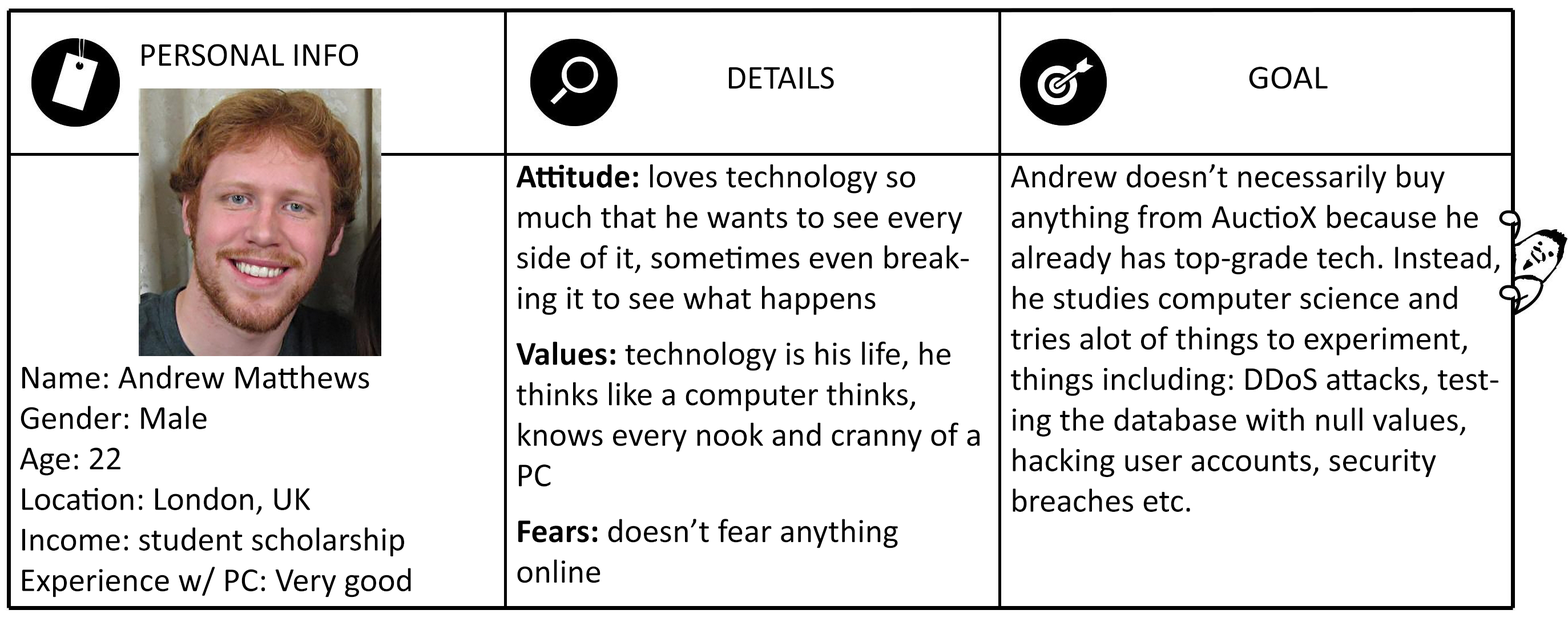
<style>
.page{position:relative;width:1568px;height:622px;background:#ffffff}
.page>*{position:absolute;margin:0}
.t1{font:33.8px "Calibri";color:#000000}
.t2{font:33.8px "Calibri";color:#000000;scale:1.04 1}
.t3{font:33.8px "Calibri-Bold";color:#000000}
</style>
<div class="page">
<p class="t1" style="left:142px;top:44px;width:216px;height:22px">PERSONAL INFO</p>
<p class="t1" style="left:729px;top:67px;width:105px;height:22px">DETAILS</p>
<p class="t2" style="left:1249px;top:67px;width:79px;height:22px">GOAL</p>
<p class="t1" style="left:516px;top:164px;width:464px;height:419px"><span class="t3">Attitude: </span>loves technology so much that he wants to see every side of it, sometimes even breaking it to see what happens<br><span class="t3">Values:</span> technology is his life, he thinks like a computer thinks, knows every nook and cranny of a PC<br><span class="t3">Fears:</span> doesn’t fear anything online</p>
<p class="t1" style="left:1011px;top:164px;width:489px;height:348px">Andrew doesn’t necessarily buy anything from AuctioX because he already has top-grade tech. Instead, he studies computer science and tries alot of things to experiment, things including: DDoS attacks, testing the database with null values, hacking user accounts, security breaches etc.</p>
<p class="t1" style="left:20px;top:365px;width:391px;height:233px">Name: Andrew Matthews<br>Gender: Male<br>Age: 22<br>Location: London, UK<br>Income: student scholarship<br>Experience w/ PC: Very good</p>
</div>
